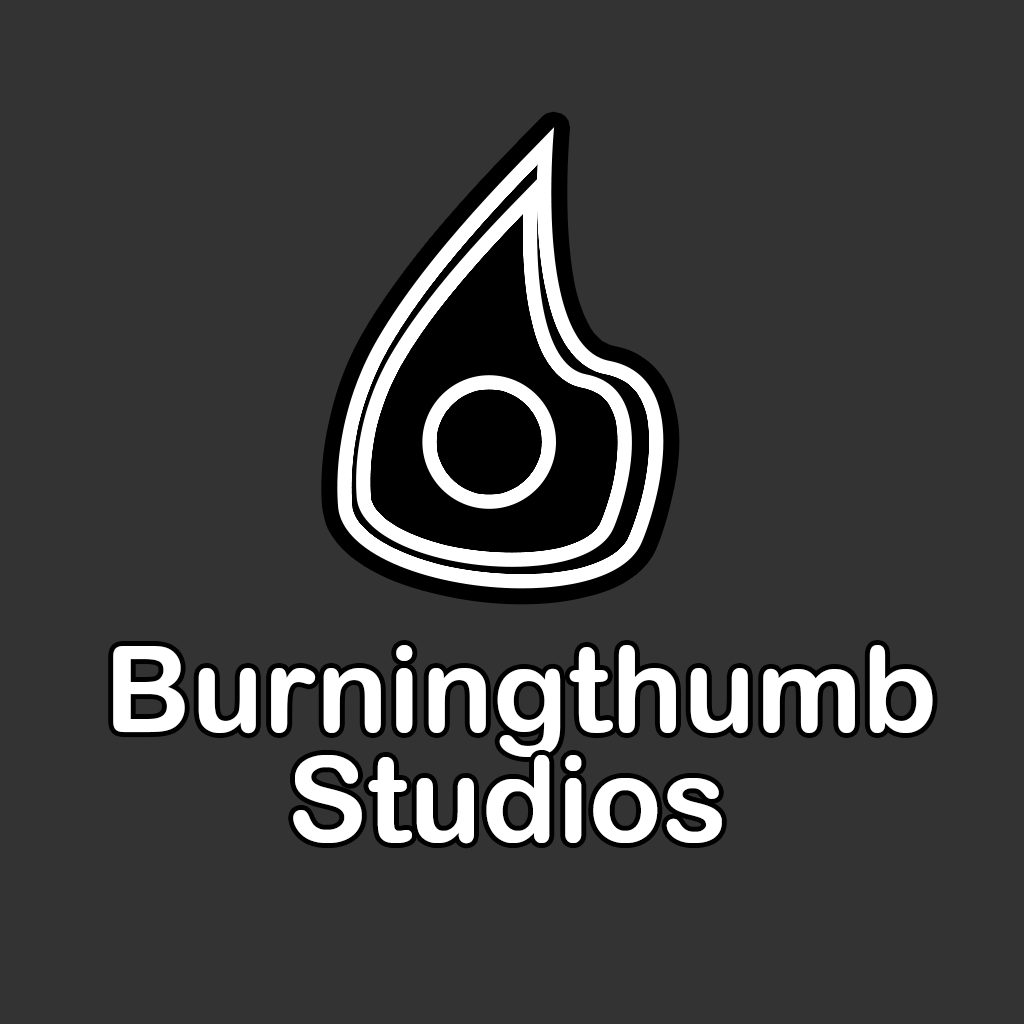
<style>
.page{position:relative;width:1024px;height:1024px;background:#333333}
.page>*{position:absolute;margin:0}
.t1{font:120px "ArialRoundedMTBold";color:#ffffff}
</style>
<div class="page">
<p class="t1" style="left:113px;top:645px;width:820px;height:112px">Burningthumb</p>
<p class="t1" style="left:293px;top:755px;width:429px;height:89px">Studios</p>
</div>
